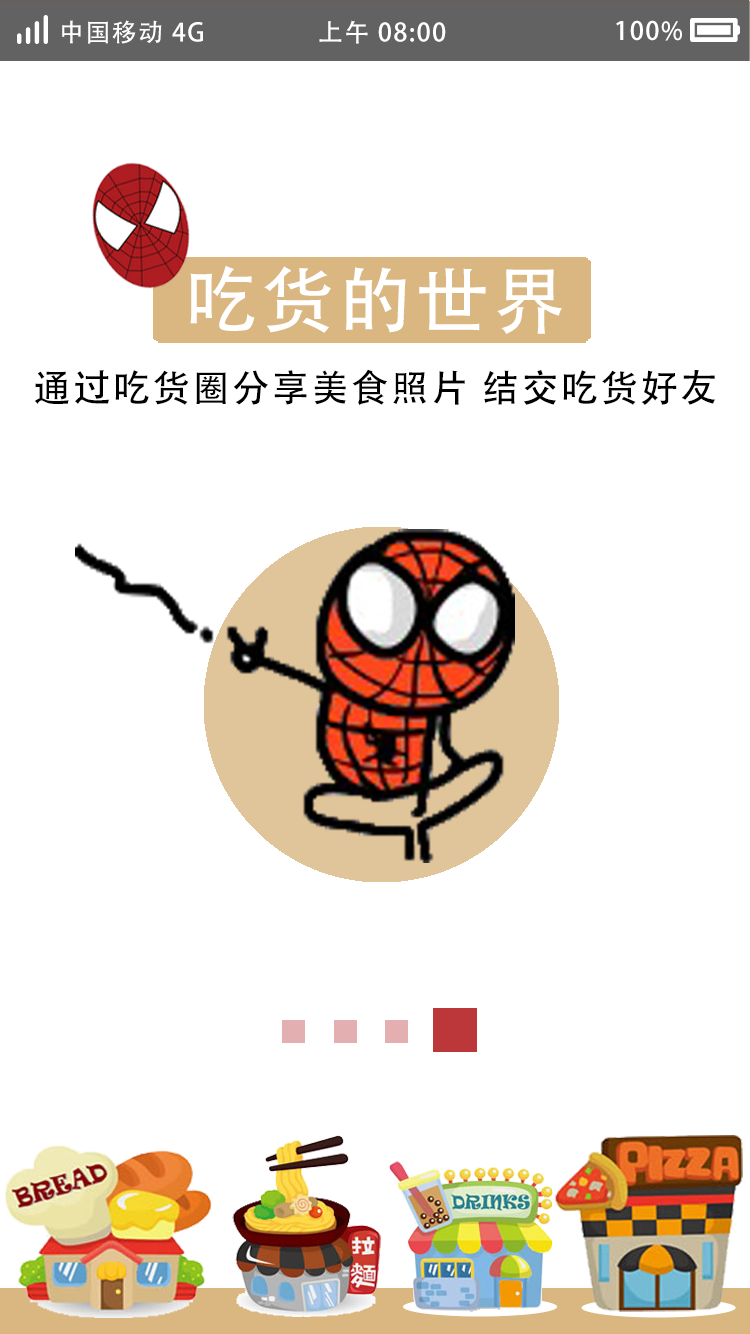
<style>
.page{position:relative;width:750px;height:1334px;background:#ffffff}
.page>*{position:absolute;margin:0}
.t1{font:25px "AdobeHeitiStd-Regular";letter-spacing:0.06em;color:#ffffff}
.t2{font:73px "AdobeHeitiStd-Regular";letter-spacing:0.06em;color:#ffffff}
.t3{font:37.5px "AdobeHeitiStd-Regular";letter-spacing:0.06em;color:#000000}
</style>
<div class="page">
<p class="t1" style="left:62px;top:20px;width:141px;height:24px">中国移动 4G</p>
<p class="t1" style="left:319px;top:20px;width:127px;height:24px">上午 08:00</p>
<p class="t1" style="left:616px;top:20px;width:66px;height:21px">100%</p>
<p class="t2" style="left:190px;top:265px;width:372px;height:69px">吃货的世界</p>
<p class="t3" style="left:34px;top:369px;width:682px;height:36px">通过吃货圈分享美食照片 结交吃货好友</p>
</div>
